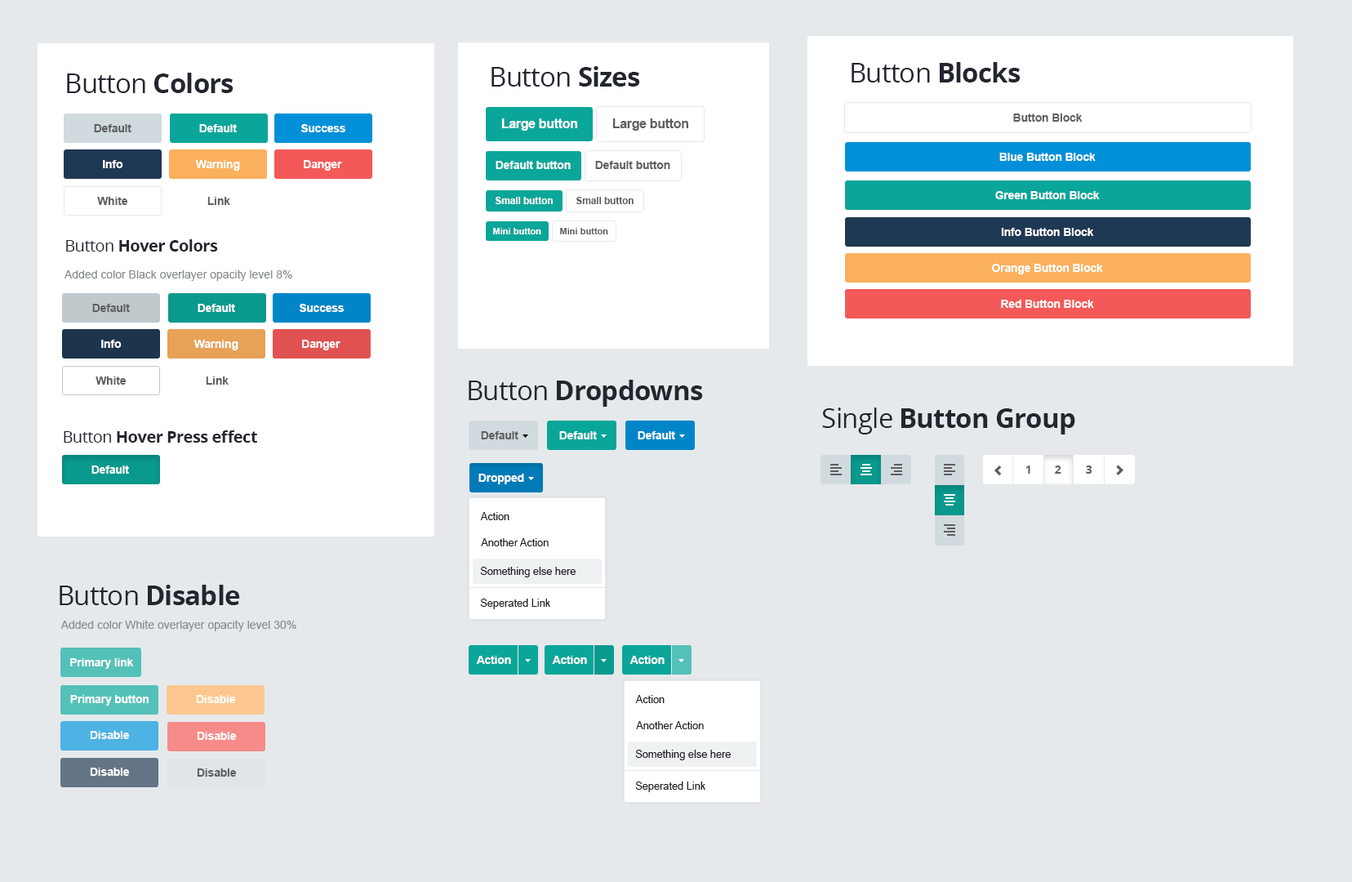
<style>
.page{position:relative;width:1352px;height:882px;background:#e5e9ec}
.page>*{position:absolute;margin:0}
.t1{font:27px "OpenSans";letter-spacing:-0.025em;color:#22262e}
.t2{font:27px "OpenSans-Bold";letter-spacing:-0.025em;color:#22262e}
.t3{font:11.1px "Arial-BoldMT";color:#5e5e5e}
.t4{font:11.1px "Arial-BoldMT";color:#ffffff}
.t5{font:12.7px "Arial-BoldMT";letter-spacing:-0.007em;color:#ffffff}
.t6{font:12.7px "Arial-BoldMT";letter-spacing:-0.007em;color:#5e5e5e}
.t7{font:9.6px "Arial-BoldMT";color:#ffffff}
.t8{font:9.6px "Arial-BoldMT";color:#5e5e5e}
.t9{font:9px "Arial-BoldMT";color:#ffffff}
.t10{font:9px "Arial-BoldMT";color:#5e5e5e}
.t11{font:16.3px "OpenSans-Bold";letter-spacing:-0.025em;color:#22262e}
.t12{font:16.3px "OpenSans";letter-spacing:-0.025em;color:#22262e}
.t13{font:11.4px "ArialMT";color:#868d90}
.t14{font:11.1px "OpenSans-Bold";letter-spacing:-0.025em;color:#5e5e5e}
.t15{font:10.4px "ArialMT";color:#1b1e24}
</style>
<div class="page">
<p class="t1" style="left:852px;top:62px;width:169px;height:20px">Button<span class="t2"> Blocks</span></p>
<p class="t1" style="left:67px;top:73px;width:167px;height:20px">Button <span class="t2">Colors</span></p>
<p class="t1" style="left:492px;top:66px;width:148px;height:21px">Button <span class="t2">Sizes</span></p>
<p class="t3" style="left:1013px;top:113px;width:70px;height:9px">Button Block</p>
<p class="t3" style="left:94px;top:124px;width:37px;height:8px">Default</p>
<p class="t4" style="left:199px;top:124px;width:38px;height:8px">Default</p>
<p class="t4" style="left:301px;top:124px;width:44px;height:8px">Success</p>
<p class="t5" style="left:501px;top:118px;width:77px;height:13px">Large button</p>
<p class="t6" style="left:612px;top:118px;width:77px;height:13px">Large button</p>
<p class="t4" style="left:103px;top:160px;width:20px;height:8px">Info</p>
<p class="t4" style="left:195px;top:160px;width:45px;height:11px">Warning</p>
<p class="t4" style="left:304px;top:160px;width:38px;height:11px">Danger</p>
<p class="t4" style="left:496px;top:161px;width:75px;height:8px">Default button</p>
<p class="t3" style="left:595px;top:161px;width:75px;height:8px">Default button</p>
<p class="t4" style="left:999px;top:153px;width:97px;height:8px">Blue Button Block</p>
<p class="t3" style="left:97px;top:197px;width:31px;height:8px">White</p>
<p class="t3" style="left:207px;top:197px;width:23px;height:8px">Link</p>
<p class="t7" style="left:495px;top:197px;width:58px;height:7px">Small button</p>
<p class="t8" style="left:576px;top:197px;width:58px;height:7px">Small button</p>
<p class="t4" style="left:995px;top:191px;width:105px;height:8px">Green Button Block</p>
<p class="t9" style="left:493px;top:228px;width:48px;height:6px">Mini button</p>
<p class="t10" style="left:560px;top:228px;width:48px;height:6px">Mini button</p>
<p class="t4" style="left:1001px;top:228px;width:93px;height:8px">Info Button Block</p>
<p class="t11" style="left:66px;top:239px;width:152px;height:12px"><span class="t12">Button </span>Hover Colors</p>
<p class="t13" style="left:65px;top:269px;width:227px;height:12px">Added color Black overlayer opacity level 8%</p>
<p class="t4" style="left:992px;top:264px;width:111px;height:10px">Orange Button Block</p>
<p class="t3" style="left:92px;top:304px;width:38px;height:8px">Default</p>
<p class="t4" style="left:198px;top:304px;width:37px;height:8px">Default</p>
<p class="t4" style="left:300px;top:304px;width:44px;height:8px">Success</p>
<p class="t4" style="left:1001px;top:300px;width:93px;height:8px">Red Button Block</p>
<p class="t4" style="left:101px;top:340px;width:21px;height:8px">Info</p>
<p class="t4" style="left:194px;top:340px;width:44px;height:10px">Warning</p>
<p class="t4" style="left:302px;top:340px;width:38px;height:10px">Danger</p>
<p class="t3" style="left:96px;top:376px;width:31px;height:9px">White</p>
<p class="t3" style="left:206px;top:376px;width:23px;height:9px">Link</p>
<p class="t2" style="left:469px;top:380px;width:234px;height:27px"><span class="t1">Button </span>Dropdowns</p>
<p class="t2" style="left:822px;top:407px;width:253px;height:27px"><span class="t1">Single </span>Button Group</p>
<p class="t11" style="left:64px;top:430px;width:193px;height:13px"><span class="t12">Button </span>Hover Press effect</p>
<p class="t3" style="left:481px;top:431px;width:37px;height:8px">Default</p>
<p class="t4" style="left:559px;top:431px;width:38px;height:8px">Default</p>
<p class="t4" style="left:638px;top:431px;width:37px;height:8px">Default</p>
<p class="t4" style="left:91px;top:465px;width:38px;height:9px">Default</p>
<p class="t4" style="left:478px;top:474px;width:46px;height:10px">Dropped</p>
<p class="t14" style="left:1026px;top:465px;width:4px;height:9px">1</p>
<p class="t14" style="left:1055px;top:465px;width:6px;height:9px">2</p>
<p class="t14" style="left:1086px;top:465px;width:7px;height:9px">3</p>
<p class="t15" style="left:480px;top:512px;width:30px;height:8px">Action</p>
<p class="t15" style="left:481px;top:538px;width:68px;height:8px">Another Action</p>
<p class="t15" style="left:480px;top:567px;width:96px;height:10px">Something else here</p>
<p class="t2" style="left:60px;top:585px;width:180px;height:20px"><span class="t1">Button </span>Disable</p>
<p class="t15" style="left:480px;top:599px;width:70px;height:10px">Seperated Link</p>
<p class="t13" style="left:60px;top:620px;width:236px;height:11px">Added color White overlayer opacity level 30%</p>
<p class="t4" style="left:70px;top:658px;width:63px;height:11px">Primary link</p>
<p class="t4" style="left:476px;top:656px;width:35px;height:8px">Action</p>
<p class="t4" style="left:552px;top:656px;width:35px;height:8px">Action</p>
<p class="t4" style="left:630px;top:656px;width:35px;height:8px">Action</p>
<p class="t4" style="left:70px;top:695px;width:79px;height:10px">Primary button</p>
<p class="t4" style="left:196px;top:695px;width:40px;height:8px">Disable</p>
<p class="t15" style="left:635px;top:695px;width:30px;height:8px">Action</p>
<p class="t15" style="left:636px;top:721px;width:68px;height:8px">Another Action</p>
<p class="t4" style="left:90px;top:731px;width:40px;height:8px">Disable</p>
<p class="t4" style="left:197px;top:732px;width:40px;height:8px">Disable</p>
<p class="t15" style="left:635px;top:750px;width:96px;height:10px">Something else here</p>
<p class="t4" style="left:90px;top:768px;width:40px;height:8px">Disable</p>
<p class="t3" style="left:197px;top:768px;width:40px;height:9px">Disable</p>
<p class="t15" style="left:635px;top:781px;width:70px;height:11px">Seperated Link</p>
</div>
